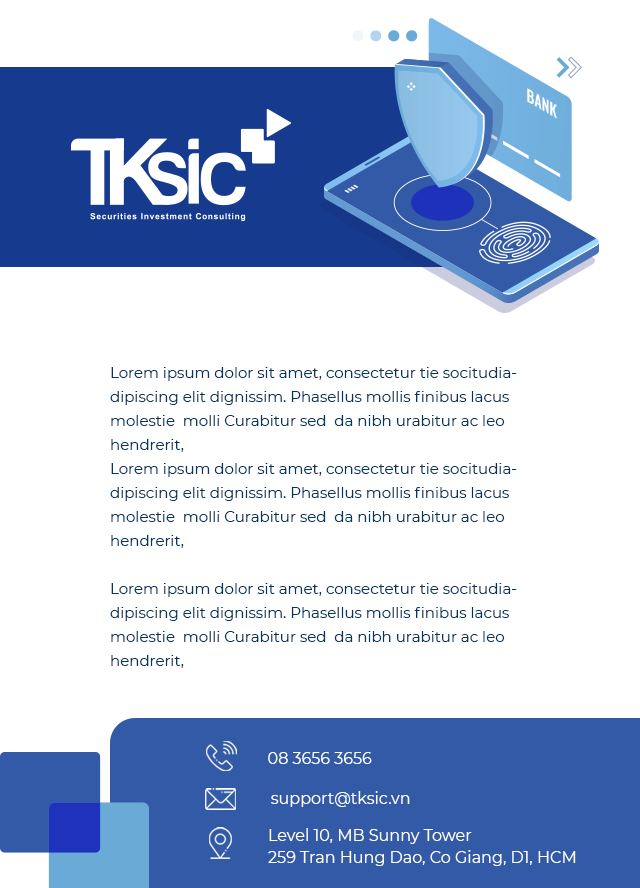
<style>
.page{position:relative;width:640px;height:888px;background:#ffffff}
.page>*{position:absolute;margin:0}
.t1{font:15px/24px "Montserrat-Regular";color:#03355e}
.t2{font:16px "Montserrat-Regular";color:#ffffff}
.t3{font:16px/22px "Montserrat-Regular";color:#ffffff}
</style>
<div class="page">
<p class="t1" style="left:110px;top:367px;width:407px;height:301px">Lorem ipsum dolor sit amet, consectetur tie socitudiadipiscing elit dignissim. Phasellus mollis finibus lacus molestie  molli Curabitur sed  da nibh urabitur ac leo hendrerit, <br>Lorem ipsum dolor sit amet, consectetur tie socitudiadipiscing elit dignissim. Phasellus mollis finibus lacus molestie  molli Curabitur sed  da nibh urabitur ac leo hendrerit, <br><br>Lorem ipsum dolor sit amet, consectetur tie socitudiadipiscing elit dignissim. Phasellus mollis finibus lacus molestie  molli Curabitur sed  da nibh urabitur ac leo hendrerit, <br><br>Lorem ipsum dolor sit amet, consectetur tie socitudiadipiscing elit dignissim. Phasellus mollis finibus lacus molestie  molli Curabitur sed  da nibh urabitur ac leo hendrerit,</p>
<p class="t2" style="left:268px;top:752px;width:104px;height:12px">08 3656 3656</p>
<p class="t2" style="left:271px;top:791px;width:139px;height:16px">support@tksic.vn</p>
<p class="t3" style="left:268px;top:828px;width:308px;height:38px">Level 10, MB Sunny Tower<br>259 Tran Hung Dao, Co Giang, D1, HCM</p>
</div>
